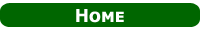
<style>
.page{position:relative;width:200px;height:30px;background:#006600}
.page>*{position:absolute;margin:0}
.t1{font:17.9px "TahomaSmallCap-Bold";color:#ffffff}
</style>
<div class="page">
<p class="t1" style="left:76px;top:9px;width:48px;height:14px">Home</p>
</div>
